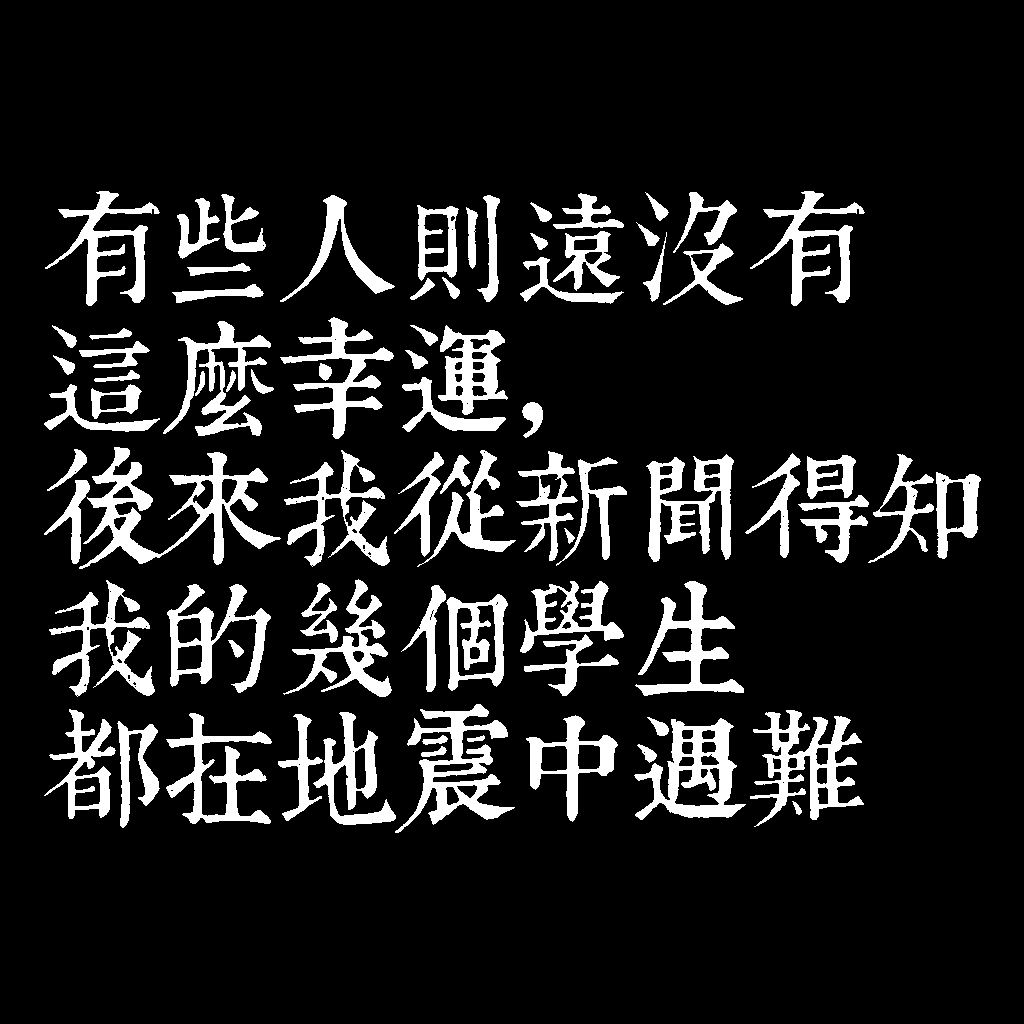
<style>
.page{position:relative;width:1024px;height:1024px;background:#000000}
.page>*{position:absolute;margin:0}
.t1{font:120px/130px "TpldKhangXiDictTrial";letter-spacing:-0.02em;color:#ffffff}
</style>
<div class="page">
<p class="t1" style="left:44px;top:191px;width:937px;height:642px">有些人則遠沒有<br>這麼幸運，<br>後來我從新聞得知<br>我的幾個學生<br>都在地震中遇難</p>
</div>
